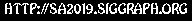
<style>
.page{position:relative;width:192px;height:21px;background:#000000}
.page>*{position:absolute;margin:0}
.t1{font:12.5px "HoboStd";color:#ffffff;text-transform:uppercase}
.t2{font:12.5px "HoboStd";letter-spacing:-0.3em;color:#ffffff;text-transform:uppercase}
.t3{font:12.5px "HoboStd";letter-spacing:0.02em;color:#ffffff;text-transform:uppercase}
.t4{font:12.5px "HoboStd";letter-spacing:-0.08em;color:#ffffff;text-transform:uppercase}
.t5{font:12.5px "HoboStd";letter-spacing:-0.12em;color:#ffffff;text-transform:uppercase}
</style>
<div class="page">
<p class="t1" style="left:5px;top:3px;width:182px;height:11px">http:<span class="t2">/</span>/sa<span class="t3">2</span><span class="t4">0</span><span class="t5">1</span>9.siggraph.org</p>
</div>
